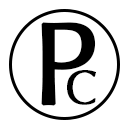
<style>
.page{position:relative;width:128px;height:128px;background:#ffffff}
.page>*{position:absolute;margin:0}
.t1{font:114px "OptimaLTStd";color:#000000;font-weight:bold}
.t2{font:47px "OptimaLTStd";color:#000000;font-weight:bold}
</style>
<div class="page">
<p class="t1" style="left:41px;top:22px;width:55px;height:84px">P</p>
<p class="t2" style="left:67px;top:70px;width:29px;height:35px">C</p>
</div>
